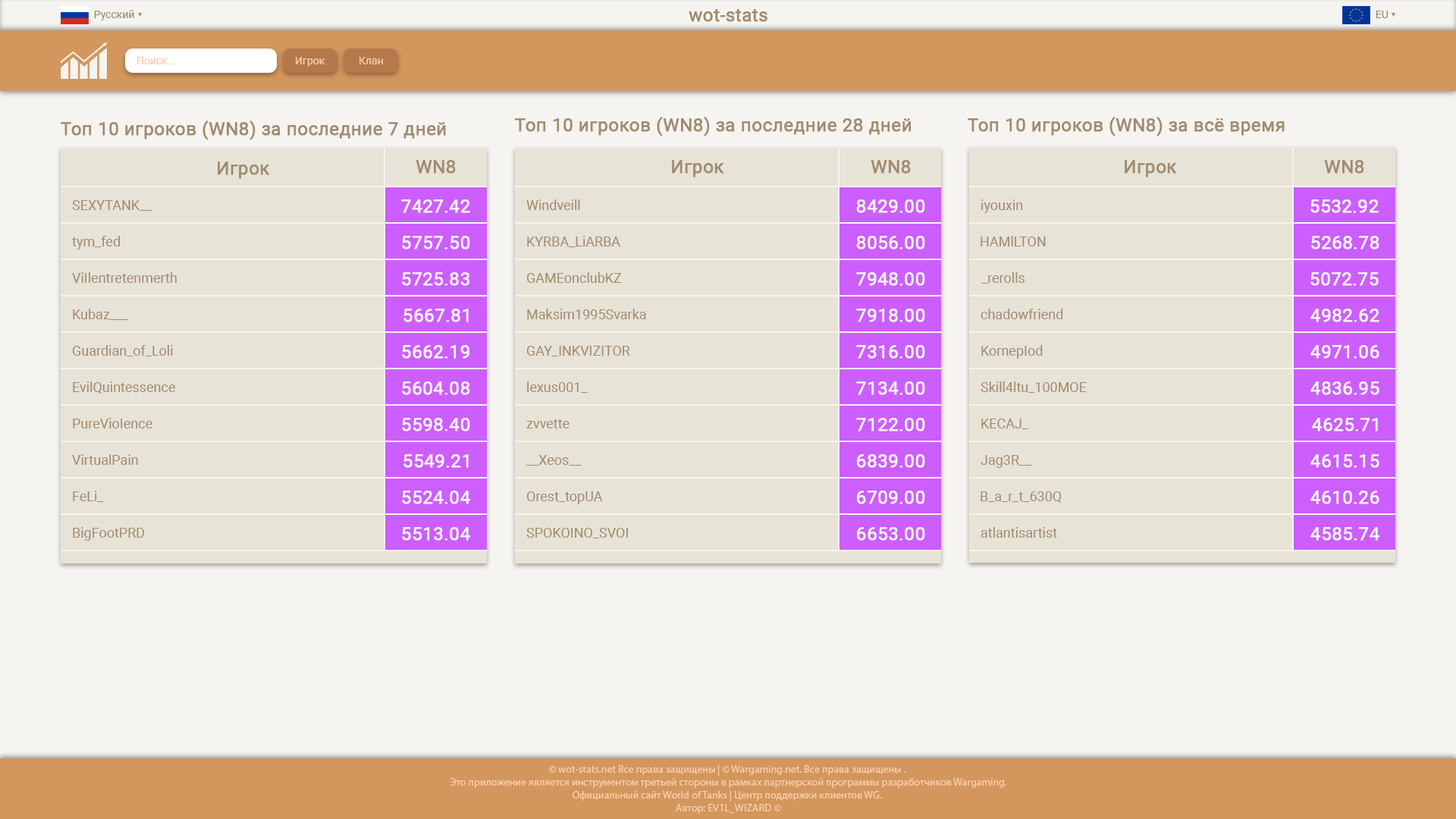
<style>
.page{position:relative;width:1456px;height:819px;background:#f6f4f0}
.page>*{position:absolute;margin:0}
.t1{font:10.6px "Roboto-Regular";color:#a08b70}
.t2{font:18.2px "Roboto-Regular";color:#a08b70;font-weight:bold}
.t3{font:10.6px "Roboto-Regular";color:#ffc7a7}
.t4{font:10.6px "Roboto-Regular";color:#fbcfab}
.t5{font:13.6px "Roboto-Regular";color:#a08b70}
.t6{font:18.2px "Roboto-Regular";color:#f6f4f0;font-weight:bold}
.t7{font:10.6px "MyriadPro-Regular";color:#fbcfab}
</style>
<div class="page">
<p class="t1" style="left:94px;top:10px;width:40px;height:10px">Русский</p>
<p class="t2" style="left:689px;top:9px;width:78px;height:13px">wot-stats</p>
<p class="t1" style="left:1376px;top:11px;width:12px;height:7px">EU</p>
<p class="t3" style="left:137px;top:57px;width:38px;height:7px">Поиск...</p>
<p class="t4" style="left:296px;top:57px;width:29px;height:10px">Игрок</p>
<p class="t4" style="left:359px;top:57px;width:24px;height:7px">Клан</p>
<p class="t2" style="left:61px;top:121px;width:385px;height:19px">Топ 10 игроков (WN8) за последние 7 дней</p>
<p class="t2" style="left:515px;top:117px;width:397px;height:19px">Топ 10 игроков (WN8) за последние 28 дней</p>
<p class="t2" style="left:968px;top:117px;width:317px;height:19px">Топ 10 игроков (WN8) за всё время</p>
<p class="t2" style="left:218px;top:162px;width:52px;height:17px">Игрок</p>
<p class="t2" style="left:416px;top:160px;width:40px;height:14px">WN8</p>
<p class="t2" style="left:672px;top:160px;width:52px;height:17px">Игрок</p>
<p class="t2" style="left:871px;top:160px;width:40px;height:14px">WN8</p>
<p class="t2" style="left:1125px;top:160px;width:52px;height:17px">Игрок</p>
<p class="t2" style="left:1324px;top:160px;width:40px;height:14px">WN8</p>
<p class="t5" style="left:72px;top:200px;width:80px;height:11px">SEXYTANK__</p>
<p class="t6" style="left:401px;top:199px;width:69px;height:14px">7427.42</p>
<p class="t5" style="left:526px;top:199px;width:54px;height:11px">Windveill</p>
<p class="t6" style="left:856px;top:199px;width:69px;height:14px">8429.00</p>
<p class="t5" style="left:981px;top:199px;width:42px;height:14px">iyouxin</p>
<p class="t6" style="left:1310px;top:199px;width:69px;height:14px">5532.92</p>
<p class="t5" style="left:72px;top:236px;width:48px;height:13px">tym_fed</p>
<p class="t6" style="left:402px;top:236px;width:68px;height:13px">5757.50</p>
<p class="t5" style="left:527px;top:236px;width:93px;height:11px">KYRBA_LiARBA</p>
<p class="t6" style="left:856px;top:236px;width:69px;height:13px">8056.00</p>
<p class="t5" style="left:981px;top:236px;width:65px;height:10px">HAMlLTON</p>
<p class="t6" style="left:1311px;top:236px;width:68px;height:13px">5268.78</p>
<p class="t5" style="left:72px;top:272px;width:105px;height:11px">ViIlentretenmerth</p>
<p class="t6" style="left:402px;top:272px;width:67px;height:14px">5725.83</p>
<p class="t5" style="left:527px;top:272px;width:95px;height:11px">GAMEonclubKZ</p>
<p class="t6" style="left:856px;top:272px;width:69px;height:14px">7948.00</p>
<p class="t5" style="left:981px;top:272px;width:43px;height:12px">_rerolls</p>
<p class="t6" style="left:1310px;top:272px;width:69px;height:14px">5072.75</p>
<p class="t5" style="left:73px;top:309px;width:56px;height:11px">Kubaz___</p>
<p class="t6" style="left:403px;top:309px;width:66px;height:13px">5667.81</p>
<p class="t5" style="left:527px;top:309px;width:119px;height:10px">Maksim1995Svarka</p>
<p class="t6" style="left:856px;top:309px;width:69px;height:13px">7918.00</p>
<p class="t5" style="left:981px;top:309px;width:82px;height:10px">chadowfriend</p>
<p class="t6" style="left:1310px;top:309px;width:69px;height:13px">4982.62</p>
<p class="t5" style="left:73px;top:345px;width:100px;height:11px">Guardian_of_Loli</p>
<p class="t6" style="left:402px;top:345px;width:67px;height:14px">5662.19</p>
<p class="t5" style="left:527px;top:346px;width:103px;height:10px">GAY_INKVIZITOR</p>
<p class="t6" style="left:856px;top:345px;width:69px;height:14px">7316.00</p>
<p class="t5" style="left:981px;top:345px;width:62px;height:14px">KornepIod</p>
<p class="t6" style="left:1310px;top:345px;width:69px;height:14px">4971.06</p>
<p class="t5" style="left:73px;top:381px;width:102px;height:13px">EvilQuintessence</p>
<p class="t6" style="left:402px;top:381px;width:68px;height:14px">5604.08</p>
<p class="t5" style="left:527px;top:381px;width:61px;height:12px">lexus001_</p>
<p class="t6" style="left:856px;top:381px;width:69px;height:14px">7134.00</p>
<p class="t5" style="left:981px;top:381px;width:106px;height:12px">Skill4ltu_100MOE</p>
<p class="t6" style="left:1310px;top:381px;width:69px;height:14px">4836.95</p>
<p class="t5" style="left:73px;top:418px;width:79px;height:10px">PureVioIence</p>
<p class="t6" style="left:402px;top:418px;width:68px;height:13px">5598.40</p>
<p class="t5" style="left:526px;top:419px;width:44px;height:9px">zvvette</p>
<p class="t6" style="left:856px;top:418px;width:69px;height:13px">7122.00</p>
<p class="t5" style="left:981px;top:419px;width:48px;height:10px">KECAJ_</p>
<p class="t6" style="left:1312px;top:418px;width:66px;height:13px">4625.71</p>
<p class="t5" style="left:72px;top:454px;width:66px;height:11px">VirtualPain</p>
<p class="t6" style="left:403px;top:454px;width:66px;height:14px">5549.21</p>
<p class="t5" style="left:526px;top:455px;width:56px;height:11px">__Xeos__</p>
<p class="t6" style="left:857px;top:454px;width:68px;height:14px">6839.00</p>
<p class="t5" style="left:981px;top:455px;width:51px;height:13px">Jag3R__</p>
<p class="t6" style="left:1310px;top:454px;width:69px;height:14px">4615.15</p>
<p class="t5" style="left:73px;top:491px;width:31px;height:11px">FeLi_</p>
<p class="t6" style="left:402px;top:491px;width:69px;height:13px">5524.04</p>
<p class="t5" style="left:526px;top:491px;width:77px;height:13px">Orest_topUA</p>
<p class="t6" style="left:857px;top:491px;width:68px;height:13px">6709.00</p>
<p class="t5" style="left:981px;top:491px;width:81px;height:12px">B_a_r_t_630Q</p>
<p class="t6" style="left:1310px;top:491px;width:69px;height:13px">4610.26</p>
<p class="t5" style="left:73px;top:527px;width:72px;height:14px">BigFootPRD</p>
<p class="t6" style="left:402px;top:527px;width:69px;height:14px">5513.04</p>
<p class="t5" style="left:526px;top:528px;width:102px;height:10px">SPOKOINO_SVOI</p>
<p class="t6" style="left:857px;top:527px;width:68px;height:14px">6653.00</p>
<p class="t5" style="left:981px;top:527px;width:76px;height:11px">atlantisartist</p>
<p class="t6" style="left:1310px;top:527px;width:70px;height:14px">4585.74</p>
<p class="t7" style="left:450px;top:764px;width:556px;height:50px;text-align:center">© wot-stats.net Все права защищены | © Wargaming.net. Все права защищены . <br>Это приложение является инструментом третьей стороны в рамках партнерской программы разработчиков Wargaming.<br>Официальный сайт World of Tanks | Центр поддержки клиентов WG. <br>Автор: EV1L_WIZARD ©</p>
</div>
